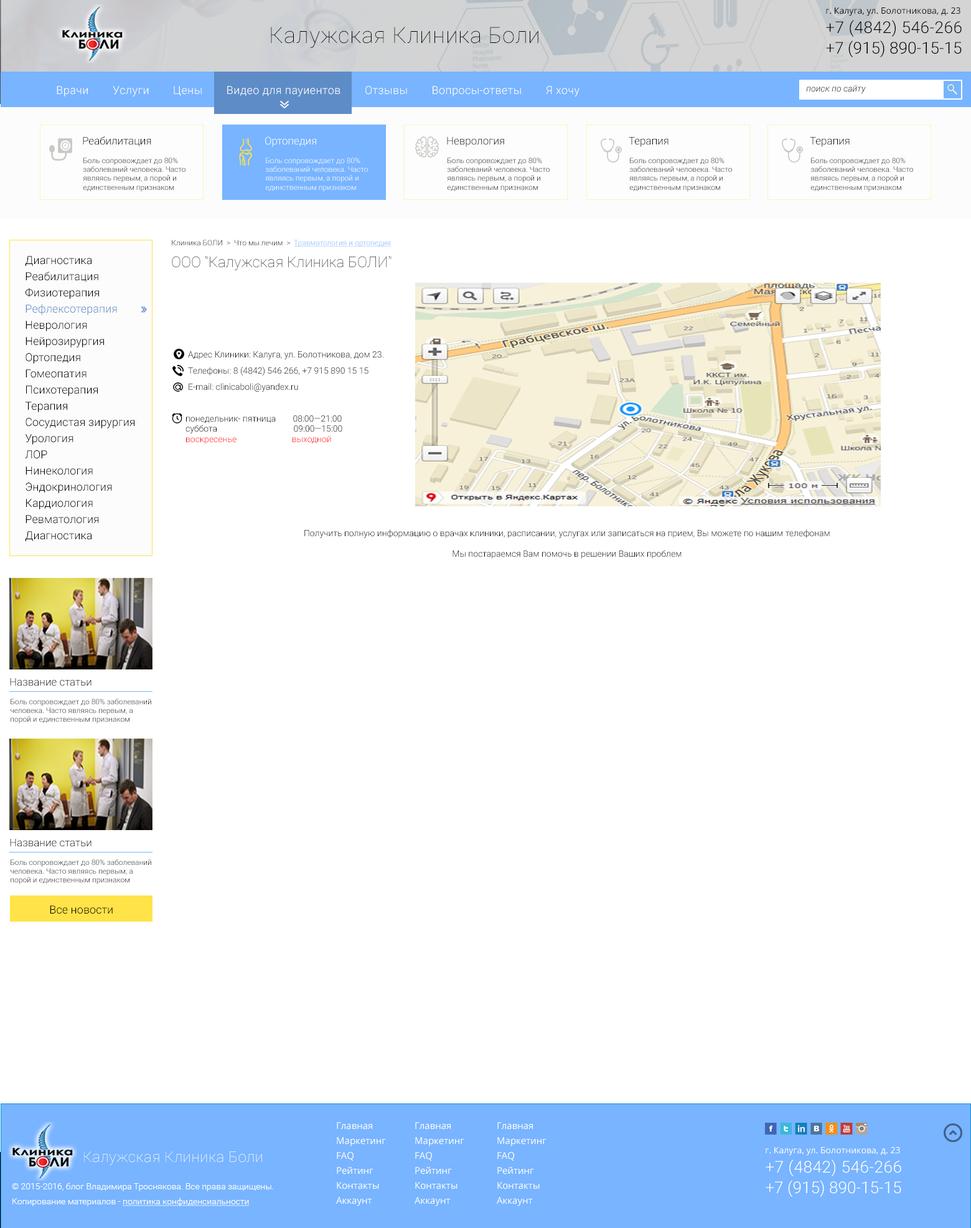
<style>
.page{position:relative;width:971px;height:1228px;background:#ffffff}
.page>*{position:absolute;margin:0}
.t1{font:8.7px "OpenSans";color:#000000}
.t2{font:22.4px "Roboto-Thin";letter-spacing:0.02em;color:#000000}
.t3{font:16.2px "Roboto-Light";letter-spacing:0.02em;color:#000000}
.t4{font:16.2px "Roboto-Light";color:#000000}
.t5{font:11.2px "Roboto-Light";letter-spacing:0.02em;color:#ffffff}
.t6{font:8.7px "Roboto-LightItalic"}
.t7{font:10.6px "Roboto-Light";color:#000000}
.t8{font:10.6px "Roboto-Light";color:#ffffff}
.t9{font:7.5px "Roboto-Light";color:#000000}
.t10{font:7.5px "Roboto-Light";color:#ffffff}
.t11{font:7.5px "Roboto-Light";color:#78b4ff;text-decoration:underline}
.t12{font:11.2px/16.2px "Roboto-Light";color:#000000}
.t13{font:11.2px/16.2px "Roboto-Light";color:#5e8cc7}
.t14{font:14.9px "Roboto-Thin"}
.t15{font:8.7px/16.2px "Roboto-Light";color:#000000}
.t16{font:8.7px "Roboto-Light";color:#000000}
.t17{font:8.7px "Roboto-Light";color:#ff0000}
.t18{font:11.2px "Roboto-Light";color:#000000}
.t19{font:9.3px/14.9px "OpenSans";color:#ffffff}
.t20{font:14.9px "Roboto-Thin";letter-spacing:0.02em;color:#ffffff}
.t21{font:8.7px "OpenSans";color:#ffffff}
.t22{font:16.2px "Roboto-Light";letter-spacing:0.02em;color:#ffffff}
.t23{font:16.2px "Roboto-Light";color:#ffffff}
.t24{font:8.7px/7.5px "Roboto-Light";color:#ffffff}
.t25{font:8.7px/7.5px "Roboto-Light";color:#ffffff;text-decoration:underline}
</style>
<div class="page">
<p class="t1" style="left:826px;top:7px;width:135px;height:9px">г. Калуга, ул. Болотникова, д. 23</p>
<p class="t2" style="left:271px;top:27px;width:268px;height:21px">Калужская Клиника Боли</p>
<p class="t3" style="left:826px;top:20px;width:136px;height:17px">+7 (4842) 546-266</p>
<p class="t4" style="left:826px;top:40px;width:136px;height:17px">+7 (915) 890-15-15</p>
<p class="t5" style="left:57px;top:86px;width:523px;height:11px">Врачи        Услуги        Цены        Видео для пауиентов        Отзывы        Вопросы-ответы        Я хочу</p>
<p class="t6" style="left:806px;top:85px;width:60px;height:8px">поиск по сайту</p>
<p class="t7" style="left:83px;top:136px;width:68px;height:10px">Реабилитация</p>
<p class="t8" style="left:265px;top:136px;width:51px;height:11px">Ортопедия</p>
<p class="t7" style="left:447px;top:137px;width:57px;height:10px">Неврология</p>
<p class="t7" style="left:629px;top:137px;width:40px;height:10px">Терапия</p>
<p class="t7" style="left:810px;top:137px;width:40px;height:10px">Терапия</p>
<p class="t9" style="left:83px;top:158px;width:103px;height:34px">Боль сопровождает до 80% заболеваний человека. Часто являясь первым, а порой и единственным признаком заболевания, боль выполняет защитные функции, предупреждая человека об опасности.</p>
<p class="t10" style="left:265px;top:158px;width:103px;height:34px">Боль сопровождает до 80% заболеваний человека. Часто являясь первым, а порой и единственным признаком заболевания, боль выполняет защитные функции, предупреждая человека об опасности.</p>
<p class="t9" style="left:447px;top:158px;width:103px;height:34px">Боль сопровождает до 80% заболеваний человека. Часто являясь первым, а порой и единственным признаком заболевания, боль выполняет защитные функции, предупреждая человека об опасности.</p>
<p class="t9" style="left:629px;top:158px;width:103px;height:34px">Боль сопровождает до 80% заболеваний человека. Часто являясь первым, а порой и единственным признаком заболевания, боль выполняет защитные функции, предупреждая человека об опасности.</p>
<p class="t9" style="left:811px;top:158px;width:102px;height:34px">Боль сопровождает до 80% заболеваний человека. Часто являясь первым, а порой и единственным признаком заболевания, боль выполняет защитные функции, предупреждая человека об опасности.</p>
<p class="t9" style="left:172px;top:240px;width:220px;height:7px">Клиника БОЛИ  &gt;  Что мы лечим  &gt;  <span class="t11">Травматология и ортопедия</span></p>
<p class="t12" style="left:25px;top:256px;width:109px;height:285px">Диагностика <br>Реабилитация<br>Физиотерапия<br><span class="t13">Рефлексотерапия<br></span>Неврология<br>Нейрозирургия<br>Ортопедия<br>Гомеопатия<br>Психотерапия<br>Терапия<br>Сосудистая зирургия<br>Урология<br>ЛОР<br>Нинекология<br>Эндокринология<br>Кардиология<br>Ревматология<br>Диагностика</p>
<p class="t14" style="left:172px;top:256px;width:220px;height:14px">ООО "Калужская Клиника БОЛИ"</p>
<p class="t15" style="left:188px;top:351px;width:196px;height:41px">Адрес Клиники: Калуга, ул. Болотникова, дом 23.<br>Телефоны: 8 (4842) 546 266, +7 915 890 15 15<br>E-mail: clinicaboli@yandex.ru</p>
<p class="t16" style="left:186px;top:415px;width:156px;height:29px">понедельник- пятница        08:00—21:00<br>суббота                                    09:00—15:00<br><span class="t17">воскресенье                          выходной</span></p>
<p class="t16" style="left:304px;top:529px;width:526px;height:29px;text-align:center">Получить полную информацию о врачах клиники, расписании, услугах или записаться на прием, Вы можете по нашим телефонам<br><br>Мы постараемся Вам помочь в решении Ваших проблем</p>
<p class="t7" style="left:10px;top:678px;width:82px;height:8px">Название статьи</p>
<p class="t9" style="left:11px;top:698px;width:140px;height:25px">Боль сопровождает до 80% заболеваний человека. Часто являясь первым, а порой и единственным признаком заболевания, боль выполняет защитные функции, предупреждая человека об опасности.</p>
<p class="t7" style="left:10px;top:839px;width:82px;height:8px">Название статьи</p>
<p class="t9" style="left:11px;top:859px;width:140px;height:25px">Боль сопровождает до 80% заболеваний человека. Часто являясь первым, а порой и единственным признаком заболевания, боль выполняет защитные функции, предупреждая человека об опасности.</p>
<p class="t18" style="left:50px;top:905px;width:63px;height:9px">Все новости</p>
<p class="t19" style="left:336px;top:1122px;width:50px;height:84px">Главная<br>Маркетинг<br>FAQ<br>Рейтинг<br>Контакты<br>Аккаунт</p>
<p class="t19" style="left:415px;top:1122px;width:49px;height:84px">Главная<br>Маркетинг<br>FAQ<br>Рейтинг<br>Контакты<br>Аккаунт</p>
<p class="t19" style="left:497px;top:1122px;width:50px;height:84px">Главная<br>Маркетинг<br>FAQ<br>Рейтинг<br>Контакты<br>Аккаунт</p>
<p class="t20" style="left:84px;top:1151px;width:178px;height:14px">Калужская Клиника Боли</p>
<p class="t21" style="left:766px;top:1146px;width:134px;height:10px">г. Калуга, ул. Болотникова, д. 23</p>
<p class="t22" style="left:766px;top:1159px;width:136px;height:17px">+7 (4842) 546-266</p>
<p class="t23" style="left:766px;top:1180px;width:136px;height:17px">+7 (915) 890-15-15</p>
<p class="t24" style="left:12px;top:1182px;width:261px;height:24px">© 2015-2016, блог Владимира Троснякова. Все права защищены.<br><br>Копирование материалов - <span class="t25">политика конфиденсиальности</span></p>
</div>
